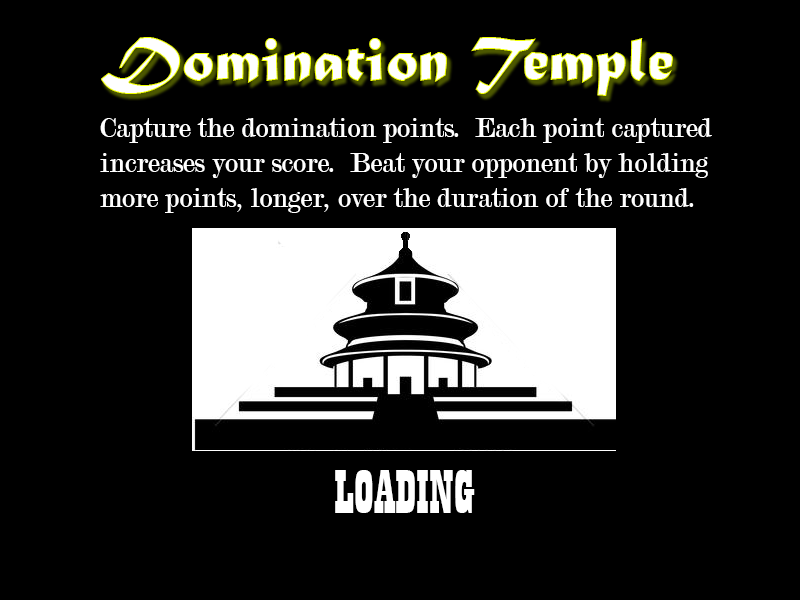
<style>
.page{position:relative;width:800px;height:600px;background:#000000}
.page>*{position:absolute;margin:0}
.t1{font:65px "MaturaMTScriptCapitals";color:#ffffff}
.t2{font:29px "Modern-Regular";color:#ffffff}
.t3{font:65px "Playbill";color:#ffffff}
</style>
<div class="page">
<p class="t1" style="left:101px;top:37px;width:572px;height:59px">Domination Temple</p>
<p class="t2" style="left:100px;top:118px;width:612px;height:95px">Capture the domination points.  Each point captured increases your score.  Beat your opponent by holding more points, longer, over the duration of the round.  First player to 100 wins!</p>
<p class="t3" style="left:335px;top:470px;width:140px;height:43px">LOADING</p>
</div>
